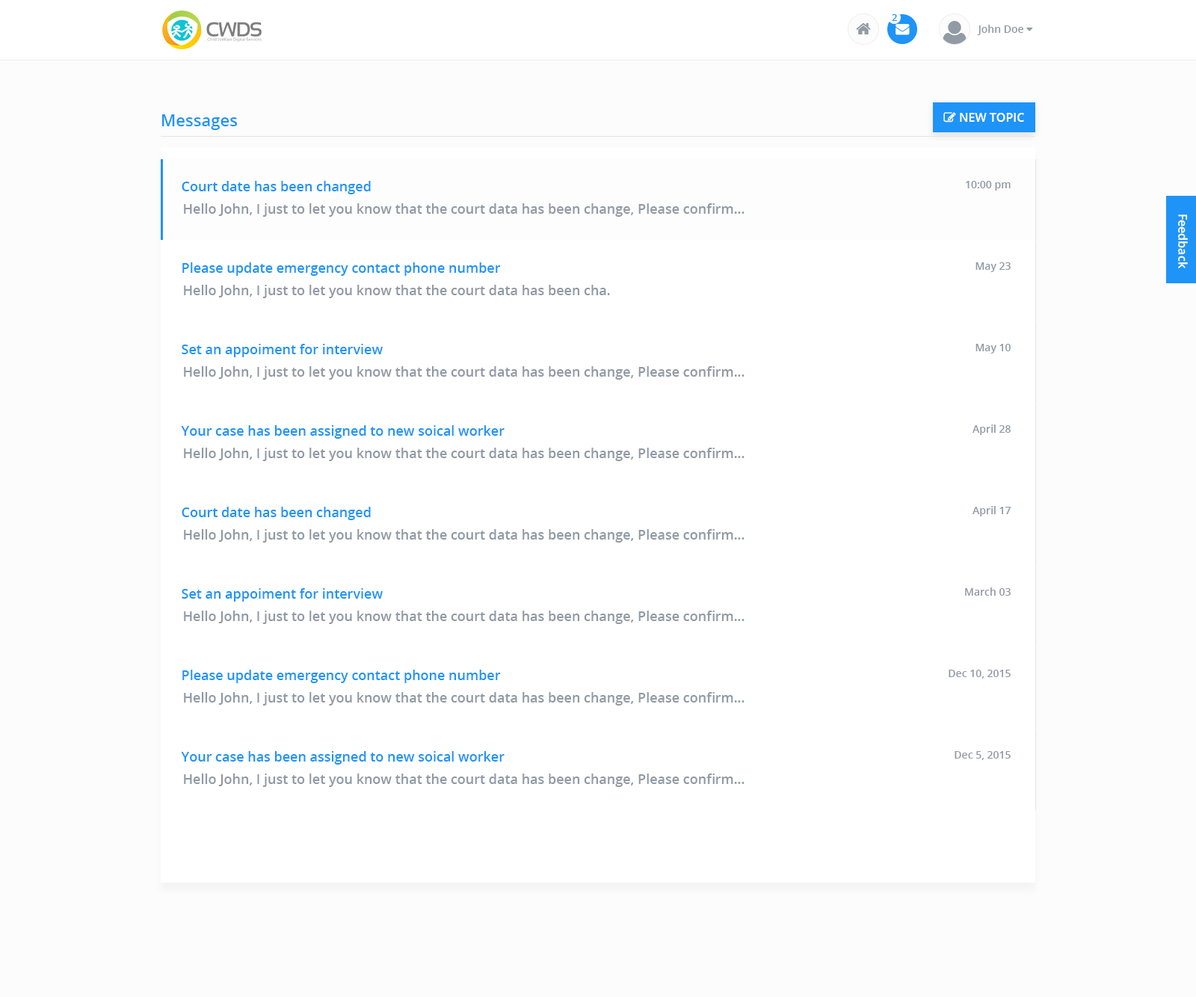
<style>
.page{position:relative;width:1196px;height:997px;background:#ffffff}
.page>*{position:absolute;margin:0}
.t1{font:9.5px "OpenSans-Semibold";color:#1e94f8}
.t2{font:16.4px "OpenSans-Semibold";color:#1e94f8}
.t3{font:13.5px "OpenSans-Semibold";color:#1e94f8}
.t4{font:10.5px "OpenSans-Semibold";color:#919aa5}
.t5{font:13.5px "OpenSans-Semibold";color:#919aa5}
.t6{font:12px "OpenSans-Semibold";color:#ffffff}
</style>
<div class="page">
<p class="t1" style="left:892px;top:14px;width:5px;height:7px">2</p>
<p class="t2" style="left:162px;top:114px;width:75px;height:16px">Messages</p>
<p class="t3" style="left:182px;top:181px;width:189px;height:13px">Court date has been changed</p>
<p class="t4" style="left:966px;top:181px;width:45px;height:10px">10:00 pm</p>
<p class="t5" style="left:184px;top:203px;width:560px;height:14px">Hello John, I just to let you know that the court data has been change, Please confirm...</p>
<p class="t6" style="left:1178px;top:215px;width:10px;height:53px;rotate:90deg">Feedback</p>
<p class="t3" style="left:182px;top:262px;width:319px;height:14px">Please update emergency contact phone number</p>
<p class="t4" style="left:975px;top:262px;width:36px;height:10px">May 23</p>
<p class="t5" style="left:184px;top:285px;width:426px;height:13px">Hello John, I just to let you know that the court data has been cha.</p>
<p class="t3" style="left:182px;top:344px;width:201px;height:13px">Set an appoiment for interview</p>
<p class="t4" style="left:975px;top:344px;width:36px;height:10px">May 10</p>
<p class="t5" style="left:184px;top:366px;width:560px;height:14px">Hello John, I just to let you know that the court data has been change, Please confirm...</p>
<p class="t3" style="left:181px;top:425px;width:324px;height:14px">Your case has been assigned to new soical worker</p>
<p class="t4" style="left:972px;top:425px;width:39px;height:10px">April 28</p>
<p class="t5" style="left:184px;top:448px;width:560px;height:13px">Hello John, I just to let you know that the court data has been change, Please confirm...</p>
<p class="t3" style="left:182px;top:507px;width:189px;height:13px">Court date has been changed</p>
<p class="t4" style="left:972px;top:506px;width:39px;height:10px">April 17</p>
<p class="t5" style="left:184px;top:529px;width:560px;height:14px">Hello John, I just to let you know that the court data has been change, Please confirm...</p>
<p class="t3" style="left:182px;top:588px;width:201px;height:14px">Set an appoiment for interview</p>
<p class="t4" style="left:965px;top:587px;width:46px;height:9px">March 03</p>
<p class="t5" style="left:184px;top:611px;width:560px;height:13px">Hello John, I just to let you know that the court data has been change, Please confirm...</p>
<p class="t3" style="left:182px;top:670px;width:319px;height:13px">Please update emergency contact phone number</p>
<p class="t4" style="left:949px;top:670px;width:62px;height:9px">Dec 10, 2015</p>
<p class="t5" style="left:184px;top:692px;width:560px;height:14px">Hello John, I just to let you know that the court data has been change, Please confirm...</p>
<p class="t3" style="left:181px;top:751px;width:324px;height:14px">Your case has been assigned to new soical worker</p>
<p class="t4" style="left:954px;top:751px;width:57px;height:9px">Dec 5, 2015</p>
<p class="t5" style="left:184px;top:774px;width:560px;height:13px">Hello John, I just to let you know that the court data has been change, Please confirm...</p>
</div>
